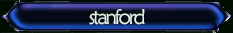
<style>
.page{position:relative;width:233px;height:33px}
.page>*{position:absolute;margin:0}
.t1{font:20.8px "MaiandraGD-Regular";letter-spacing:-0.12em;color:#dff0df}
</style>
<div class="page">
<p class="t1" style="left:89px;top:9px;width:56px;height:16px">stanford</p>
</div>
